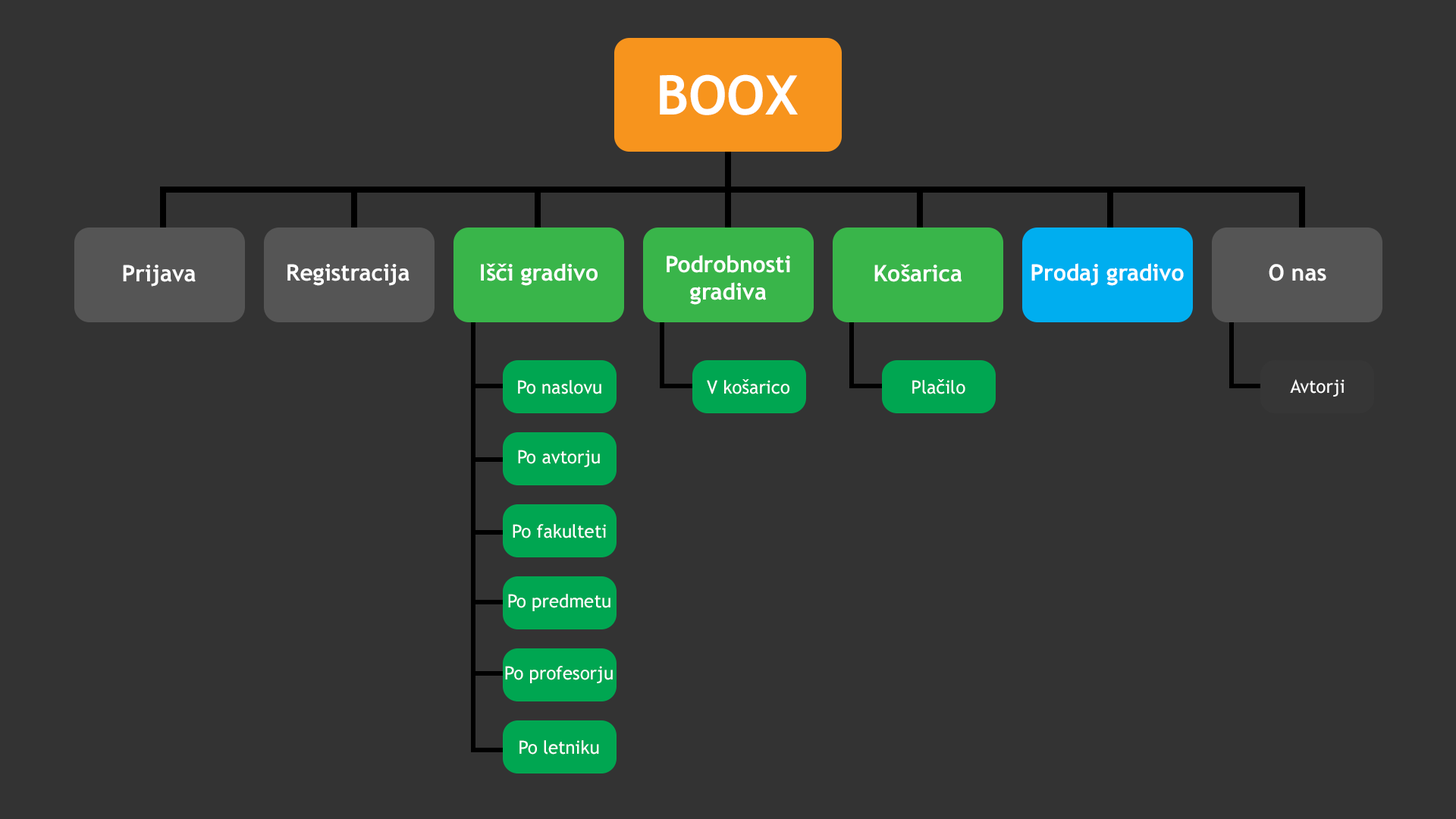
<style>
.page{position:relative;width:1456px;height:819px;background:#333333}
.page>*{position:absolute;margin:0}
.t1{font:54.6px "TrebuchetMS-Bold";color:#ffffff}
.t2{font:22.7px "TrebuchetMS-Bold";color:#ffffff}
.t3{font:18.2px "TrebuchetMS";color:#ffffff}
</style>
<div class="page">
<p class="t1" style="left:660px;top:74px;width:138px;height:41px">BOOX</p>
<p class="t2" style="left:667px;top:255px;width:123px;height:50px;text-align:center">Podrobnosti<br>gradiva</p>
<p class="t2" style="left:123px;top:265px;width:73px;height:22px">Prijava</p>
<p class="t2" style="left:287px;top:264px;width:122px;height:22px">Registracija</p>
<p class="t2" style="left:481px;top:263px;width:117px;height:23px">Išči gradivo</p>
<p class="t2" style="left:874px;top:264px;width:88px;height:18px">Košarica</p>
<p class="t2" style="left:1031px;top:263px;width:153px;height:23px">Prodaj gradivo</p>
<p class="t2" style="left:1269px;top:264px;width:57px;height:17px">O nas</p>
<p class="t3" style="left:518px;top:380px;width:83px;height:14px">Po naslovu</p>
<p class="t3" style="left:707px;top:379px;width:82px;height:15px">V košarico</p>
<p class="t3" style="left:912px;top:379px;width:53px;height:15px">Plačilo</p>
<p class="t3" style="left:1290px;top:379px;width:55px;height:18px">Avtorji</p>
<p class="t3" style="left:518px;top:450px;width:82px;height:17px">Po avtorju</p>
<p class="t3" style="left:513px;top:524px;width:93px;height:14px">Po fakulteti</p>
<p class="t3" style="left:508px;top:594px;width:102px;height:17px">Po predmetu</p>
<p class="t3" style="left:505px;top:666px;width:108px;height:17px">Po profesorju</p>
<p class="t3" style="left:519px;top:740px;width:80px;height:15px">Po letniku</p>
</div>
